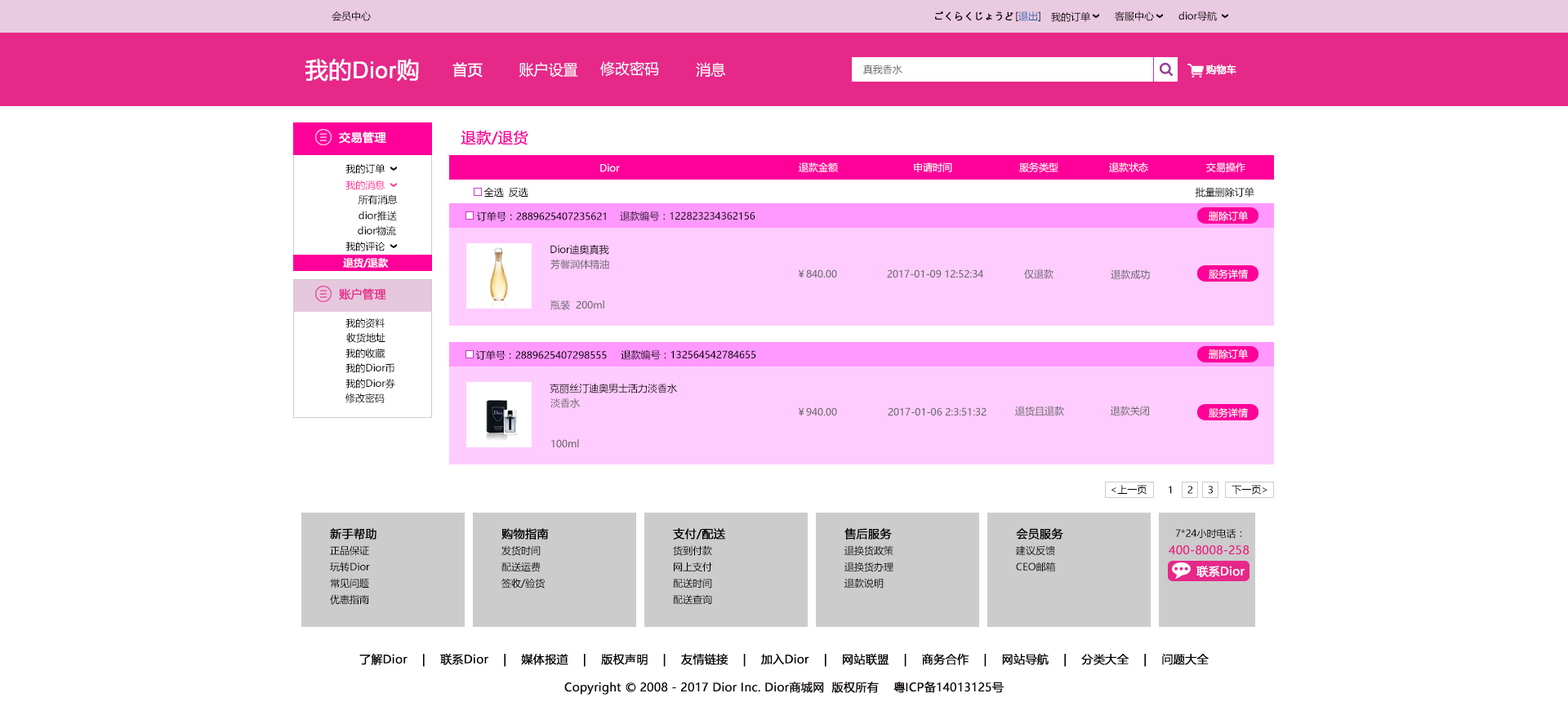
<style>
.page{position:relative;width:1568px;height:702px;background:#ffffff}
.page>*{position:absolute;margin:0}
.t1{font:9.8px "MicrosoftYaHei";color:#040000}
.t2{font:9.8px "MicrosoftYaHei";color:#040000;font-weight:bold}
.t3{font:9.8px "MicrosoftYaHei";color:#2a62ae}
.t4{font:22.9px "ArialMT";color:#ffffff;font-weight:bold}
.t5{font:22.9px "MicrosoftYaHei";color:#ffffff;font-weight:bold}
.t6{font:14.7px "MicrosoftYaHei";color:#ffffff;font-weight:bold}
.t7{font:14.7px "MicrosoftYaHei";color:#ffffff}
.t8{font:9.8px "MicrosoftYaHei";color:#666666}
.t9{font:9.8px "MicrosoftYaHei";color:#ffffff;font-weight:bold}
.t10{font:11.4px "MicrosoftYaHei";color:#ffffff;font-weight:bold}
.t11{font:14.7px "MicrosoftYaHei";color:#ff0099;font-weight:bold}
.t12{font:9.8px "MicrosoftYaHei";color:#000000}
.t13{font:9.8px "MicrosoftYaHei";color:#ffffff}
.t14{font:9.8px "MicrosoftYaHei";color:#ff3399}
.t15{font:11.4px "MicrosoftYaHei";color:#e62889;font-weight:bold}
.t16{font:11.4px "MicrosoftYaHei";color:#040000;font-weight:bold}
.t17{font:11.4px "MicrosoftYaHei";color:#000000;font-weight:bold}
</style>
<div class="page">
<p class="t1" style="left:332px;top:11px;width:39px;height:10px">会员中心</p>
<p class="t2" style="left:935px;top:11px;width:78px;height:10px">ごくらくじょうど</p>
<p class="t3" style="left:1016px;top:11px;width:24px;height:10px"><span class="t1">[</span>退出<span class="t1">]</span></p>
<p class="t1" style="left:1051px;top:11px;width:39px;height:11px">我的订单</p>
<p class="t1" style="left:1115px;top:11px;width:39px;height:10px">客服中心</p>
<p class="t1" style="left:1178px;top:11px;width:39px;height:10px">dior导航</p>
<p class="t4" style="left:305px;top:59px;width:114px;height:23px"><span class="t5">我的</span>Dior<span class="t5">购</span></p>
<p class="t6" style="left:452px;top:62px;width:31px;height:16px">首页</p>
<p class="t7" style="left:519px;top:62px;width:59px;height:16px">账户设置</p>
<p class="t7" style="left:600px;top:61px;width:59px;height:15px">修改密码</p>
<p class="t7" style="left:696px;top:62px;width:30px;height:15px">消息</p>
<p class="t8" style="left:863px;top:65px;width:39px;height:9px">真我香水</p>
<p class="t9" style="left:1205px;top:65px;width:31px;height:10px">购物车</p>
<p class="t10" style="left:339px;top:131px;width:47px;height:13px">交易管理</p>
<p class="t11" style="left:461px;top:130px;width:67px;height:15px">退款/退货</p>
<p class="t12" style="left:345px;top:163px;width:40px;height:11px">我的订单</p>
<p class="t13" style="left:600px;top:163px;width:20px;height:9px">Dior</p>
<p class="t13" style="left:799px;top:163px;width:39px;height:9px">退款金额</p>
<p class="t13" style="left:914px;top:163px;width:38px;height:9px">申请时间</p>
<p class="t13" style="left:1019px;top:163px;width:39px;height:9px">服务类型</p>
<p class="t13" style="left:1109px;top:163px;width:39px;height:9px">退款状态</p>
<p class="t13" style="left:1206px;top:163px;width:39px;height:9px">交易操作</p>
<p class="t14" style="left:345px;top:180px;width:40px;height:10px">我的消息</p>
<p class="t12" style="left:358px;top:194px;width:40px;height:11px">所有消息</p>
<p class="t12" style="left:483px;top:187px;width:21px;height:10px">全选</p>
<p class="t12" style="left:509px;top:187px;width:19px;height:11px">反选</p>
<p class="t12" style="left:1195px;top:187px;width:59px;height:11px">批量删除订单</p>
<p class="t12" style="left:359px;top:211px;width:38px;height:10px">dior推送</p>
<p class="t12" style="left:477px;top:212px;width:129px;height:9px">订单号：2889625407235621</p>
<p class="t12" style="left:620px;top:212px;width:135px;height:9px">退款编号：122823234362156</p>
<p class="t13" style="left:1209px;top:211px;width:39px;height:10px">删除订单</p>
<p class="t12" style="left:358px;top:225px;width:38px;height:11px">dior物流</p>
<p class="t12" style="left:345px;top:242px;width:40px;height:10px">我的评论</p>
<p class="t12" style="left:550px;top:245px;width:59px;height:10px">Dior迪奥真我</p>
<p class="t9" style="left:343px;top:258px;width:45px;height:10px">退货/退款</p>
<p class="t8" style="left:550px;top:260px;width:59px;height:10px">芳馨润体精油</p>
<p class="t8" style="left:798px;top:270px;width:39px;height:8px">￥840.00</p>
<p class="t8" style="left:887px;top:270px;width:96px;height:8px">2017-01-09 12:52:34</p>
<p class="t8" style="left:1024px;top:270px;width:30px;height:9px">仅退款</p>
<p class="t8" style="left:1111px;top:270px;width:39px;height:9px">退款成功</p>
<p class="t13" style="left:1209px;top:269px;width:39px;height:10px">服务详情</p>
<p class="t15" style="left:339px;top:288px;width:47px;height:13px">账户管理</p>
<p class="t8" style="left:550px;top:301px;width:54px;height:9px">瓶装  200ml</p>
<p class="t1" style="left:345px;top:318px;width:40px;height:10px">我的资料</p>
<p class="t1" style="left:346px;top:333px;width:39px;height:10px">收货地址</p>
<p class="t1" style="left:345px;top:349px;width:40px;height:10px">我的收藏</p>
<p class="t12" style="left:476px;top:350px;width:131px;height:10px">订单号：2889625407298555</p>
<p class="t12" style="left:621px;top:350px;width:135px;height:10px">退款编号：132564542784655</p>
<p class="t13" style="left:1209px;top:349px;width:39px;height:10px">删除订单</p>
<p class="t1" style="left:345px;top:363px;width:49px;height:10px">我的Dior币</p>
<p class="t1" style="left:345px;top:379px;width:50px;height:10px">我的Dior券</p>
<p class="t12" style="left:550px;top:384px;width:127px;height:10px">克丽丝汀迪奥男士活力淡香水</p>
<p class="t1" style="left:345px;top:394px;width:40px;height:9px">修改密码</p>
<p class="t8" style="left:550px;top:399px;width:30px;height:9px">淡香水</p>
<p class="t8" style="left:798px;top:408px;width:39px;height:8px">￥940.00</p>
<p class="t8" style="left:888px;top:408px;width:99px;height:8px">2017-01-06 2:3:51:32</p>
<p class="t8" style="left:1015px;top:406px;width:49px;height:10px">退货且退款</p>
<p class="t8" style="left:1110px;top:406px;width:39px;height:10px">退款关闭</p>
<p class="t13" style="left:1209px;top:408px;width:39px;height:10px">服务详情</p>
<p class="t8" style="left:551px;top:439px;width:28px;height:9px">100ml</p>
<p class="t12" style="left:1111px;top:485px;width:36px;height:10px">&lt;上一页</p>
<p class="t12" style="left:1169px;top:486px;width:3px;height:8px">1</p>
<p class="t12" style="left:1187px;top:486px;width:6px;height:8px">2</p>
<p class="t12" style="left:1208px;top:486px;width:5px;height:8px">3</p>
<p class="t12" style="left:1232px;top:485px;width:35px;height:10px">下一页&gt;</p>
<p class="t16" style="left:330px;top:528px;width:46px;height:12px">新手帮助</p>
<p class="t16" style="left:501px;top:528px;width:48px;height:12px">购物指南</p>
<p class="t16" style="left:673px;top:528px;width:52px;height:12px">支付/配送</p>
<p class="t16" style="left:844px;top:528px;width:48px;height:12px">售后服务</p>
<p class="t16" style="left:1016px;top:528px;width:47px;height:12px">会员服务</p>
<p class="t1" style="left:1175px;top:528px;width:67px;height:11px">7*24小时电话：</p>
<p class="t1" style="left:501px;top:546px;width:40px;height:10px">发货时间</p>
<p class="t1" style="left:673px;top:546px;width:39px;height:10px">货到付款</p>
<p class="t1" style="left:844px;top:546px;width:49px;height:10px">退换货政策</p>
<p class="t1" style="left:1016px;top:546px;width:39px;height:10px">建议反馈</p>
<p class="t15" style="left:1169px;top:546px;width:81px;height:9px">400-8008-258</p>
<p class="t1" style="left:330px;top:546px;width:39px;height:10px">正品保证</p>
<p class="t1" style="left:330px;top:562px;width:40px;height:10px">玩转Dior</p>
<p class="t1" style="left:501px;top:562px;width:40px;height:10px">配送运费</p>
<p class="t1" style="left:674px;top:562px;width:38px;height:10px">网上支付</p>
<p class="t1" style="left:844px;top:562px;width:49px;height:10px">退换货办理</p>
<p class="t1" style="left:1016px;top:562px;width:40px;height:10px">CEO邮箱</p>
<p class="t10" style="left:1196px;top:566px;width:49px;height:11px">联系Dior</p>
<p class="t1" style="left:330px;top:578px;width:39px;height:11px">常见问题</p>
<p class="t1" style="left:501px;top:578px;width:44px;height:11px">签收/验货</p>
<p class="t1" style="left:673px;top:578px;width:39px;height:11px">配送时间</p>
<p class="t1" style="left:844px;top:578px;width:40px;height:11px">退款说明</p>
<p class="t1" style="left:330px;top:595px;width:39px;height:10px">优惠指南</p>
<p class="t1" style="left:673px;top:595px;width:39px;height:9px">配送查询</p>
<p class="t16" style="left:359px;top:653px;width:850px;height:14px">了解Dior    |    联系Dior    |    媒体报道    |    版权声明    |    友情链接    |    加入Dior    |    网站联盟    |    商务合作    |    网站导航    |    分类大全    |    问题大全</p>
<p class="t17" style="left:564px;top:681px;width:440px;height:14px">Copyright © 2008 - 2017 Dior Inc. Dior商城网  版权所有    粤ICP备14013125号</p>
</div>
